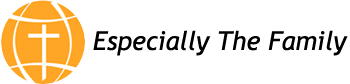
<style>
.page{position:relative;width:350px;height:84px;background:#ffffff}
.page>*{position:absolute;margin:0}
.t1{font:26px "TrebuchetMS-Italic";color:#000000}
</style>
<div class="page">
<p class="t1" style="left:93px;top:30px;width:255px;height:26px">Especially The Family</p>
</div>
